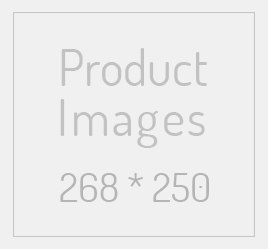
<style>
.page{position:relative;width:268px;height:249px;background:#f0f0f0}
.page>*{position:absolute;margin:0}
.t1{font:50px/50px "Dosis-Regular";color:#c2c2c2}
.t2{font:50px/50px "Dosis-Regular";letter-spacing:0.05em;color:#c2c2c2}
.t3{font:40px "Dosis-Regular";color:#b5b5b5}
</style>
<div class="page">
<p class="t1" style="left:60px;top:48px;width:147px;height:100px;text-align:center">Product<br><span class="t2">Images</span></p>
<p class="t3" style="left:60px;top:173px;width:149px;height:29px">250 * 268</p>
</div>
